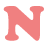
<style>
.page{position:relative;width:50px;height:50px;background:#ffffff}
.page>*{position:absolute;margin:0}
.t1{font:50px "CooperBlack";color:#f08080}
</style>
<div class="page">
<p class="t1" style="left:3px;top:6px;width:41px;height:35px">N</p>
</div>
